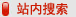
<style>
.page{position:relative;width:76px;height:17px;background:#e5e5e5}
.page>*{position:absolute;margin:0}
.t1{font:13px "SimHei";color:#cc1c04}
</style>
<div class="page">
<p class="t1" style="left:17px;top:2px;width:51px;height:13px">站内搜索</p>
</div>
